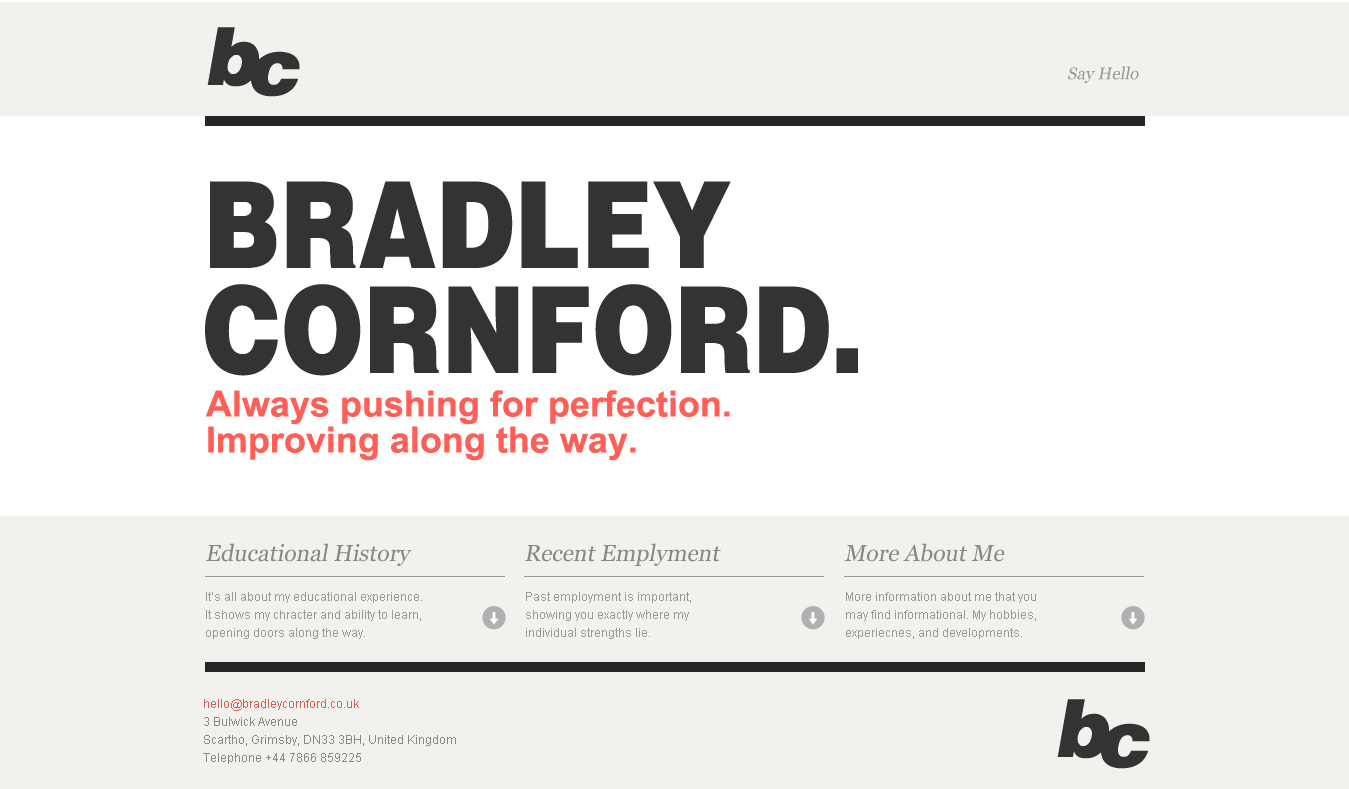
<style>
.page{position:relative;width:1349px;height:789px;background:#f2f1ed}
.page>*{position:absolute;margin:0}
.t1{font:17px "Georgia";color:#999999;font-style:italic}
.t2{font:120px/105px "HelveticaLT-Black";color:#333333;scale:0.83 1}
.t3{font:36px/36px "Arial-BoldMT";color:#ff5f57}
.t4{font:23px "Georgia";color:#888888;font-style:italic}
.t5{font:12px/18px "ArialMT";color:#999999}
.t6{font:12px/18px "ArialMT";color:#888888}
.t7{font:12px/18px "ArialMT";color:#de5a51}
</style>
<div class="page">
<p class="t1" style="left:1068px;top:66px;width:71px;height:17px">Say Hello</p>
<p class="t2" style="left:205px;top:181px;width:653px;height:195px">BRADLEY <br>CORNFORD.</p>
<p class="t3" style="left:205px;top:390px;width:525px;height:71px">Always pushing for perfection.<br>Improving along the way.</p>
<p class="t4" style="left:206px;top:543px;width:206px;height:23px">Educational History</p>
<p class="t4" style="left:525px;top:543px;width:196px;height:23px">Recent Emplyment</p>
<p class="t4" style="left:844px;top:543px;width:161px;height:19px">More About Me</p>
<p class="t5" style="left:206px;top:592px;width:216px;height:47px">It’s all about my educational experience.<br>It shows my chracter and ability to learn,<br>opening doors along the way.</p>
<p class="t5" style="left:526px;top:592px;width:165px;height:47px">Past employment is important,<br>showing you exactly where my  <br>individual strengths lie.</p>
<p class="t5" style="left:846px;top:592px;width:190px;height:47px">More information about me that you<br>may find informational. My hobbies, <br>experiecnes, and developments.</p>
<p class="t6" style="left:203px;top:699px;width:253px;height:65px"><span class="t7">hello@bradleycornford.co.uk<br></span>3 Bulwick Avenue<br>Scartho, Grimsby, DN33 3BH, United Kingdom<br>Telephone +44 7866 859225</p>
</div>
